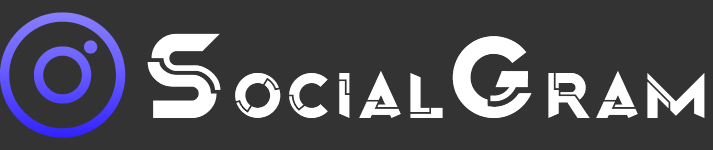
<style>
.page{position:relative;width:713px;height:150px;background:#333333}
.page>*{position:absolute;margin:0}
.t1{font:66.7px "OriginTechDemoRegular";letter-spacing:0.08em;color:#ffffff}
.t2{font:116.7px "OriginTechDemoRegular";letter-spacing:0.08em;color:#ffffff}
</style>
<div class="page">
<p class="t1" style="left:147px;top:33px;width:558px;height:85px"><span class="t2">S</span>ocial<span class="t2">G</span>ram</p>
</div>
